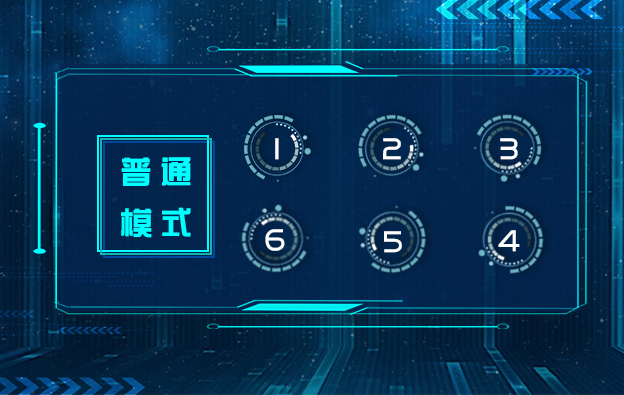
<style>
.page{position:relative;width:624px;height:395px}
.page>*{position:absolute;margin:0}
.t1{font:32px "BDZYJT--GB1-0";letter-spacing:0.24em;color:#ffffff}
.t2{font:32px "BDZYJT--GB1-0";letter-spacing:0.24em;color:#00ffff}
</style>
<div class="page">
<p class="t1" style="left:275px;top:138px;width:4px;height:22px">1</p>
<p class="t1" style="left:383px;top:138px;width:18px;height:22px">2</p>
<p class="t1" style="left:500px;top:138px;width:18px;height:22px">3</p>
<p class="t2" style="left:121px;top:157px;width:70px;height:29px">普通</p>
<p class="t2" style="left:121px;top:207px;width:70px;height:31px">模式</p>
<p class="t1" style="left:265px;top:229px;width:20px;height:22px">6</p>
<p class="t1" style="left:384px;top:231px;width:18px;height:22px">5</p>
<p class="t1" style="left:498px;top:230px;width:22px;height:22px">4</p>
</div>
